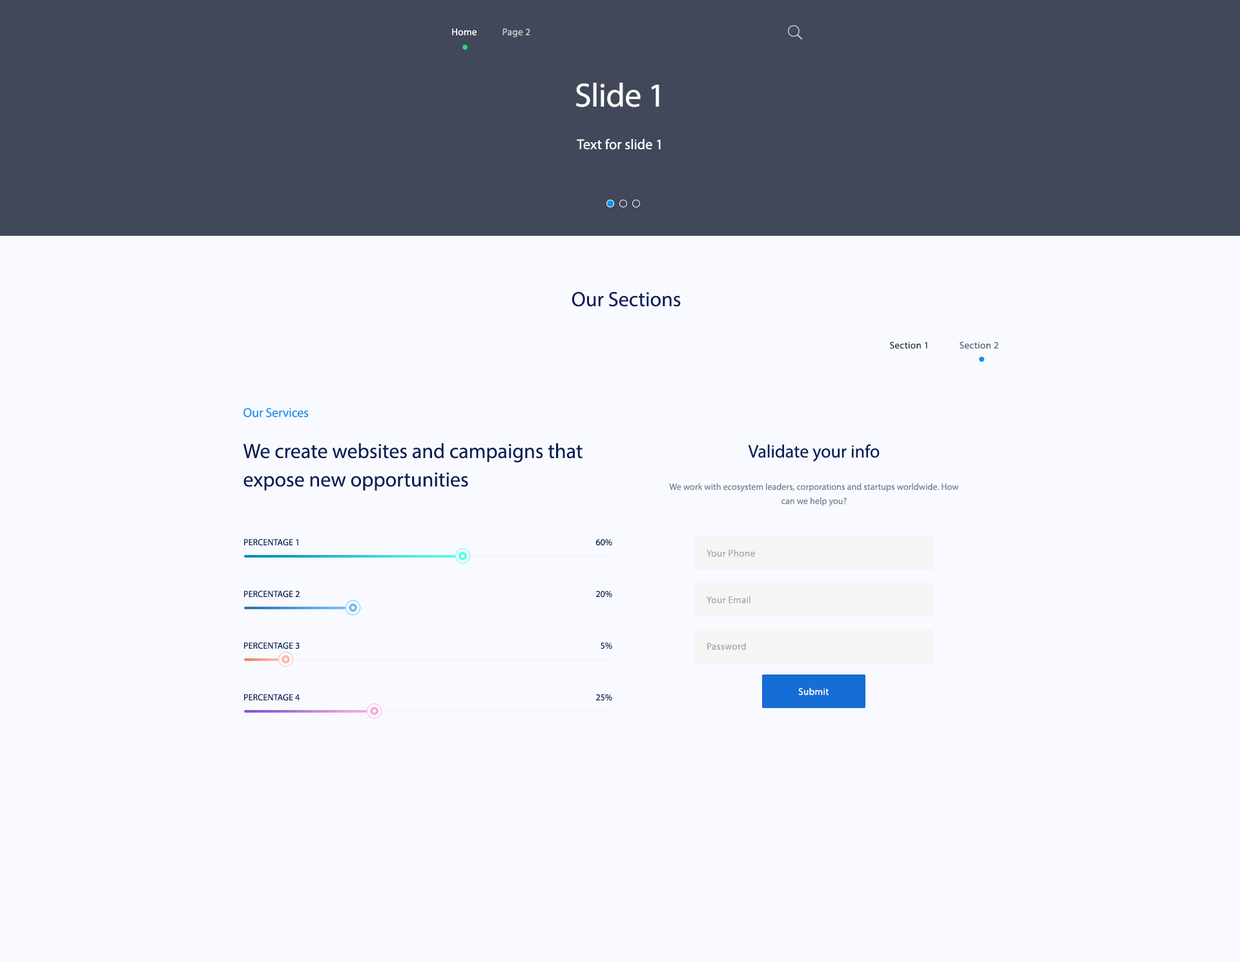
<style>
.page{position:relative;width:1240px;height:962px;background:#f8faff}
.page>*{position:absolute;margin:0}
.t1{font:9.7px "MyriadPro-Regular";letter-spacing:0.025em;color:#cacaca}
.t2{font:9.7px "MyriadPro-Regular";letter-spacing:0.025em;color:#ffffff}
.t3{font:33.6px "MyriadPro-Regular";letter-spacing:-0.01em;color:#ffffff}
.t4{font:14.2px "MyriadPro-Regular";letter-spacing:0.005em;color:#ffffff}
.t5{font:20.7px "MyriadPro-Regular";color:#071e57}
.t6{font:9.7px "MyriadPro-Regular";letter-spacing:0.025em;color:#253642}
.t7{font:9.7px "MyriadPro-Regular";letter-spacing:0.025em;color:#556575}
.t8{font:12.9px "MyriadPro-Regular";letter-spacing:-0.01em;color:#1292ee}
.t9{font:20.7px/28.4px "MyriadPro-Regular";color:#071e57}
.t10{font:18.1px "MyriadPro-Regular";color:#071e57}
.t11{font:9px/14.2px "MyriadPro-Regular";letter-spacing:0.005em;color:#748494}
.t12{font:9px "MyriadPro-Regular";letter-spacing:0.005em;color:#071e57;text-transform:uppercase}
.t13{font:9.7px "MyriadPro-Regular";letter-spacing:0.025em;color:#a1aab4}
</style>
<div class="page">
<p class="t1" style="left:452px;top:28px;width:78px;height:9px"><span class="t2">Home           </span>Page 2</p>
<p class="t3" style="left:576px;top:83px;width:83px;height:24px">Slide 1</p>
<p class="t4" style="left:577px;top:138px;width:84px;height:12px">Text for slide 1</p>
<p class="t5" style="left:572px;top:291px;width:109px;height:16px">Our Sections</p>
<p class="t6" style="left:890px;top:342px;width:108px;height:7px">Section 1  <span class="t7">Section 2</span></p>
<p class="t8" style="left:243px;top:408px;width:66px;height:9px">Our Services</p>
<p class="t9" style="left:243px;top:443px;width:340px;height:48px">We create websites and campaigns that expose new opportunities</p>
<p class="t10" style="left:748px;top:444px;width:132px;height:18px">Validate your info</p>
<p class="t11" style="left:669px;top:483px;width:290px;height:23px;text-align:center">We work with ecosystem leaders, corporations and startups worldwide. How can we help you?</p>
<p class="t12" style="left:244px;top:539px;width:54px;height:7px">percentage 1</p>
<p class="t12" style="left:595px;top:539px;width:17px;height:7px">60%</p>
<p class="t13" style="left:707px;top:549px;width:48px;height:8px">Your Phone</p>
<p class="t12" style="left:244px;top:590px;width:56px;height:7px">percentage 2</p>
<p class="t12" style="left:596px;top:590px;width:16px;height:7px">20%</p>
<p class="t13" style="left:707px;top:595px;width:43px;height:8px">Your Email</p>
<p class="t12" style="left:244px;top:642px;width:56px;height:7px">percentage 3</p>
<p class="t12" style="left:601px;top:642px;width:11px;height:7px">5%</p>
<p class="t13" style="left:707px;top:642px;width:39px;height:8px">Password</p>
<p class="t2" style="left:798px;top:687px;width:31px;height:8px">Submit</p>
<p class="t12" style="left:244px;top:694px;width:56px;height:7px">percentage 4</p>
<p class="t12" style="left:596px;top:694px;width:16px;height:7px">25%</p>
</div>
